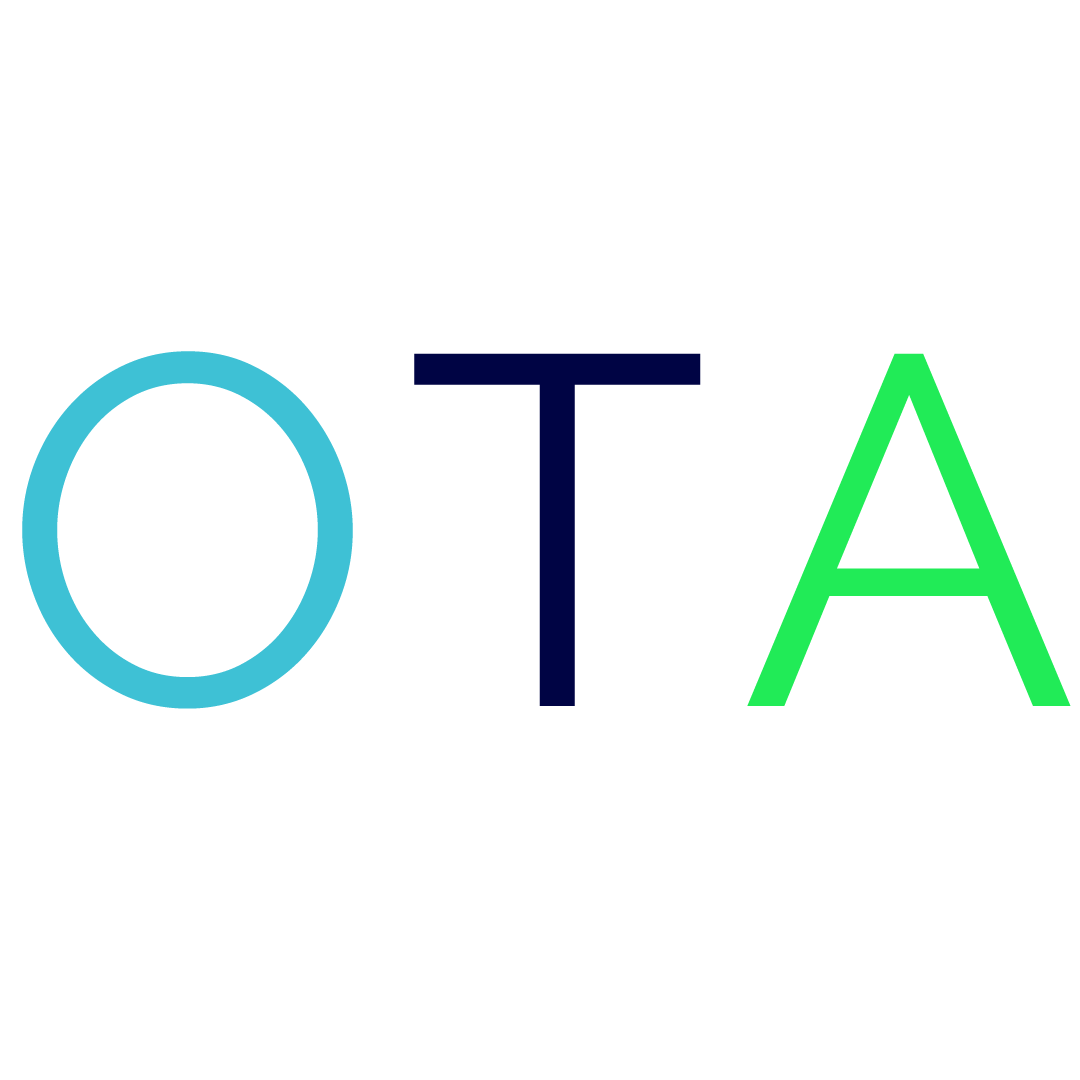
<style>
.page{position:relative;width:1080px;height:1080px;background:#ffffff}
.page>*{position:absolute;margin:0}
.t1{font:496px "Raleway";letter-spacing:0.06em;color:#3ec1d5}
.t2{font:496px "Raleway";letter-spacing:0.06em;color:#000444}
.t3{font:496px "Raleway";letter-spacing:0.06em;color:#21eb57}
</style>
<div class="page">
<p class="t1" style="left:22px;top:351px;width:1049px;height:358px">O<span class="t2">T</span><span class="t3">A</span></p>
</div>
